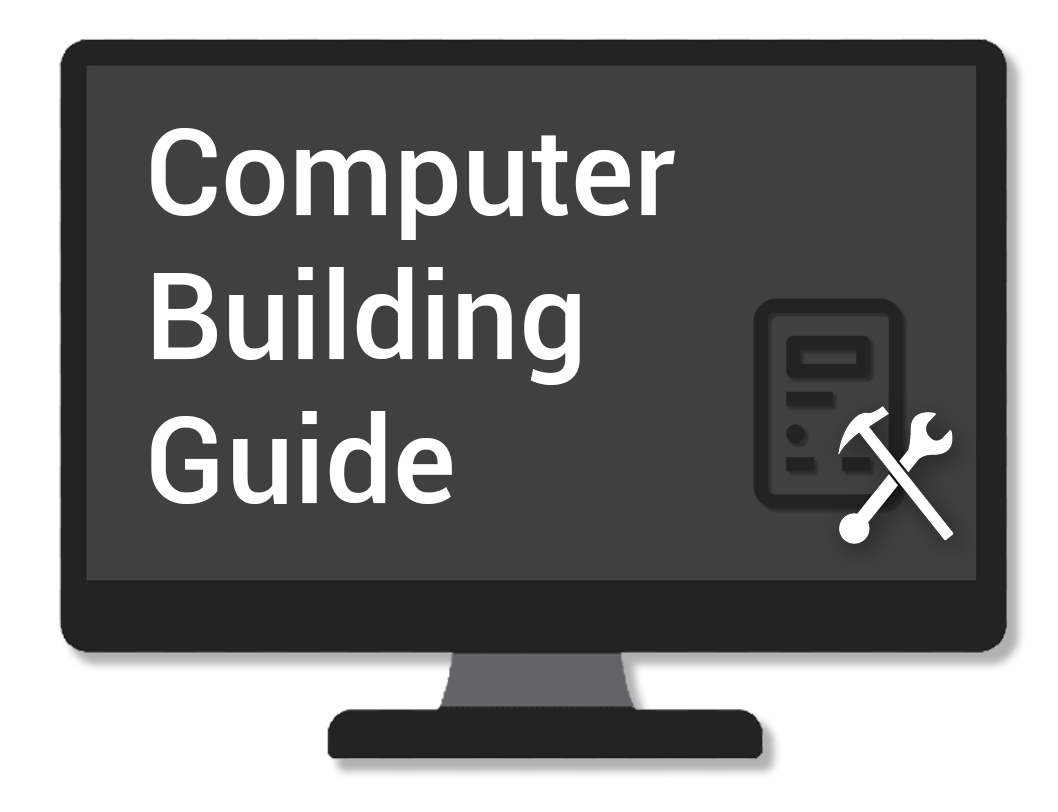
<style>
.page{position:relative;width:1058px;height:812px;background:#404040}
.page>*{position:absolute;margin:0}
.t1{font:120px "Roboto-Medium";color:#ffffff}
</style>
<div class="page">
<p class="t1" style="left:151px;top:128px;width:524px;height:376px">Computer<br>Building<br>Guide</p>
</div>
